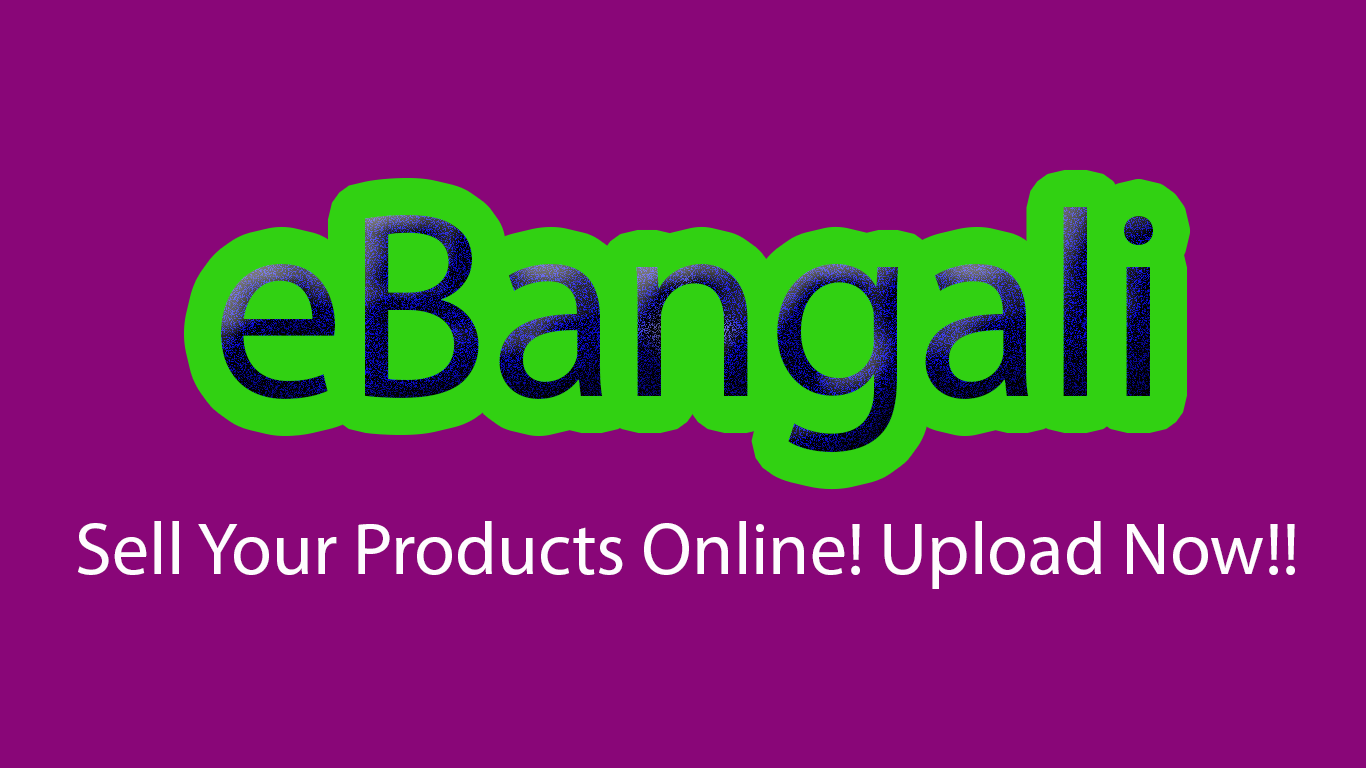
<style>
.page{position:relative;width:1366px;height:768px;background:#890678}
.page>*{position:absolute;margin:0}
.t1{font:266.4px "MyriadPro-Regular"}
.t2{font:74.1px "MyriadPro-Regular";color:#fefcfe}
</style>
<div class="page">
<p class="t1" style="left:221px;top:207px;width:932px;height:246px">eBangali</p>
<p class="t2" style="left:78px;top:521px;width:1217px;height:68px">Sell Your Products Online! Upload Now!!</p>
</div>
